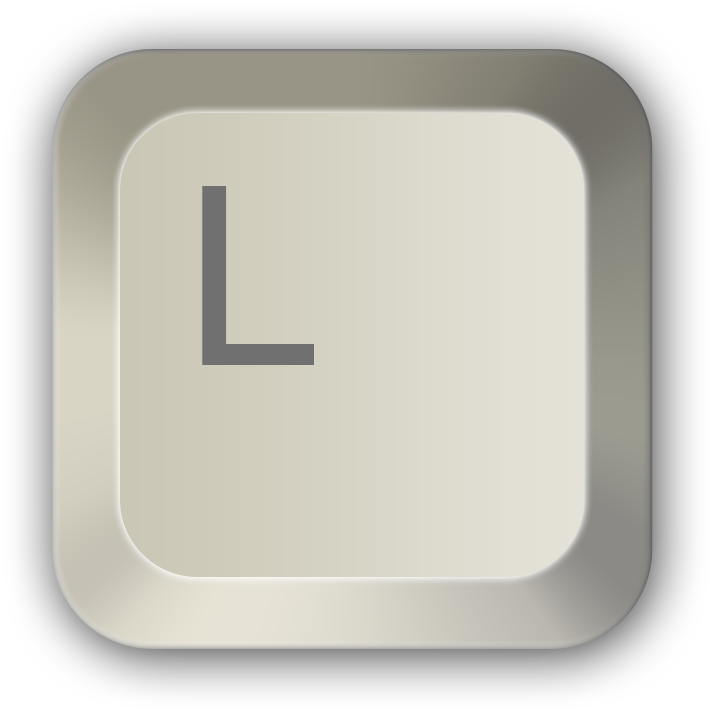
<style>
.page{position:relative;width:714px;height:713px}
.page>*{position:absolute;margin:0}
.t1{font:250px "ArialMT";color:#707070}
</style>
<div class="page">
<p class="t1" style="left:202px;top:186px;width:112px;height:179px">L</p>
</div>
